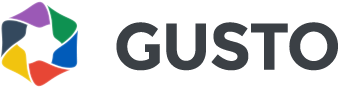
<style>
.page{position:relative;width:348px;height:88px;background:#ffffff}
.page>*{position:absolute;margin:0}
.t1{font:66px "Montserrat-Bold";letter-spacing:-0.025em;color:#3b4045}
</style>
<div class="page">
<p class="t1" style="left:116px;top:22px;width:222px;height:49px">GUSTO</p>
</div>
